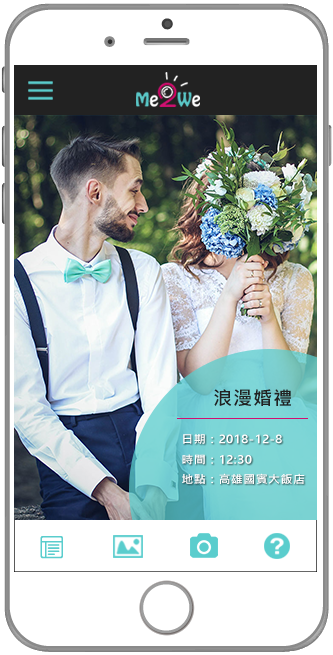
<style>
.page{position:relative;width:333px;height:655px;background:#ffffff}
.page>*{position:absolute;margin:0}
.t1{font:19.1px "MicrosoftJhengHeiUIBold";letter-spacing:0.04em;color:#222222}
.t2{font:11.2px "MicrosoftJhengHeiUIBold";letter-spacing:0.04em;color:#ffffff;scale:1.06 1}
</style>
<div class="page">
<p class="t1" style="left:214px;top:389px;width:77px;height:17px">浪漫婚禮</p>
<p class="t2" style="left:183px;top:434px;width:99px;height:10px">日期：2018-12-8</p>
<p class="t2" style="left:182px;top:454px;width:70px;height:11px">時間：12:30</p>
<p class="t2" style="left:182px;top:473px;width:123px;height:11px">地點：高雄國賓大飯店</p>
</div>
